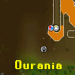
<style>
.page{position:relative;width:75px;height:75px;background:#33240b}
.page>*{position:absolute;margin:0}
.t1{font:13.8px "RuneScape-UF";letter-spacing:0.1em;color:#ffff00}
</style>
<div class="page">
<p class="t1" style="left:15px;top:60px;width:47px;height:10px">Ourania</p>
</div>
